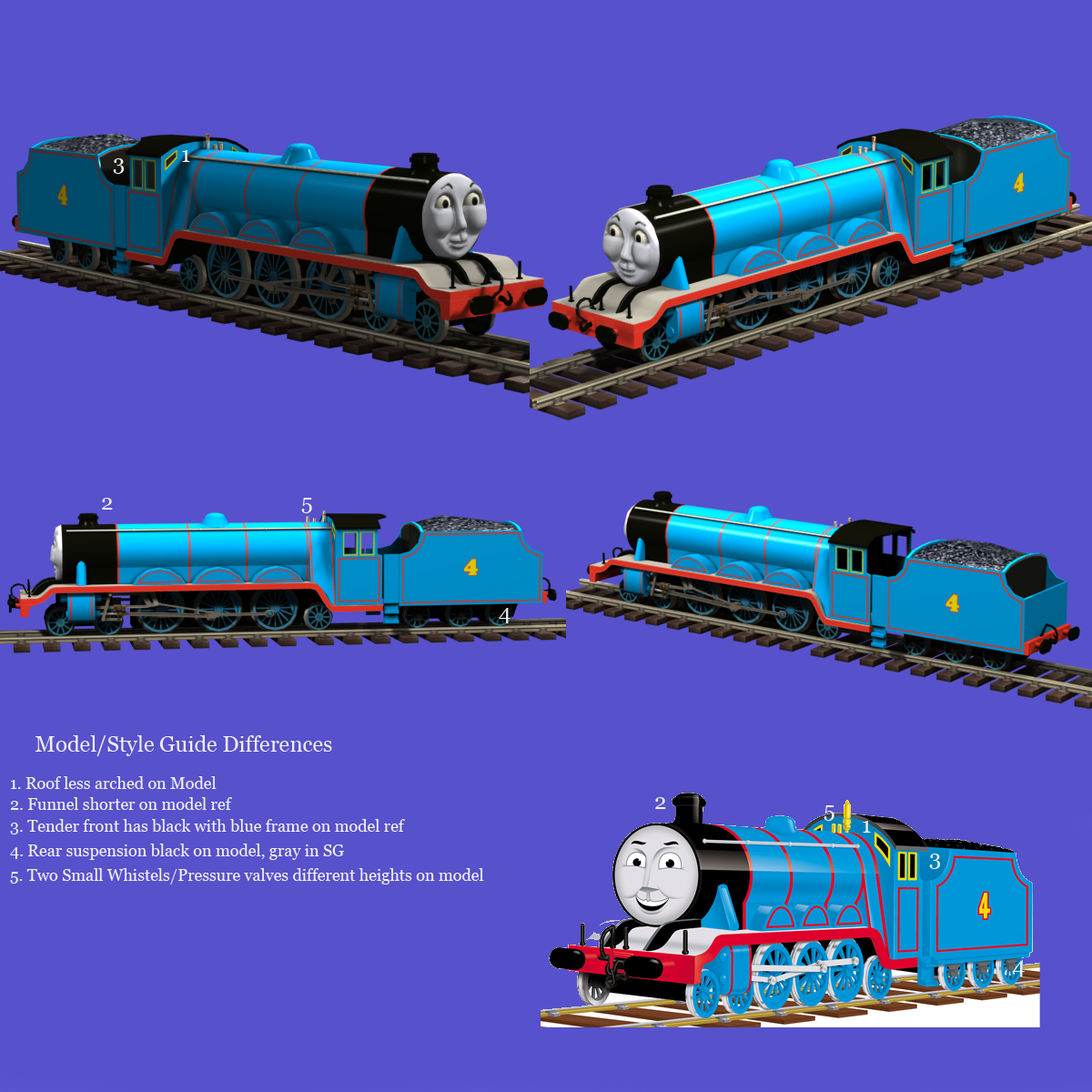
<style>
.page{position:relative;width:1092px;height:1092px;background:#5751cc}
.page>*{position:absolute;margin:0}
.t1{font:21.8px "Georgia";color:#f1f1f1}
.t2{font:16.4px "Georgia";color:#f1f1f1}
</style>
<div class="page">
<p class="t1" style="left:113px;top:158px;width:11px;height:16px">3</p>
<p class="t1" style="left:182px;top:150px;width:8px;height:12px">1</p>
<p class="t1" style="left:102px;top:498px;width:11px;height:12px">2</p>
<p class="t1" style="left:301px;top:498px;width:11px;height:15px">5</p>
<p class="t1" style="left:499px;top:608px;width:12px;height:15px">4</p>
<p class="t1" style="left:35px;top:735px;width:297px;height:21px">Model/Style Guide Differences</p>
<p class="t2" style="left:11px;top:776px;width:206px;height:13px">1. Roof less arched on Model</p>
<p class="t2" style="left:10px;top:797px;width:222px;height:13px">2. Funnel shorter on model ref</p>
<p class="t1" style="left:655px;top:797px;width:11px;height:12px">2</p>
<p class="t1" style="left:824px;top:805px;width:10px;height:16px">5</p>
<p class="t2" style="left:10px;top:819px;width:395px;height:15px">3. Tender front has black with blue frame on model ref</p>
<p class="t1" style="left:863px;top:821px;width:8px;height:12px">1</p>
<p class="t2" style="left:10px;top:844px;width:335px;height:16px">4. Rear suspension black on model, gray in SG</p>
<p class="t1" style="left:929px;top:854px;width:11px;height:15px">3</p>
<p class="t2" style="left:10px;top:868px;width:474px;height:17px">5. Two Small Whistels/Pressure valves different heights on model</p>
<p class="t1" style="left:1013px;top:961px;width:12px;height:15px">4</p>
</div>
